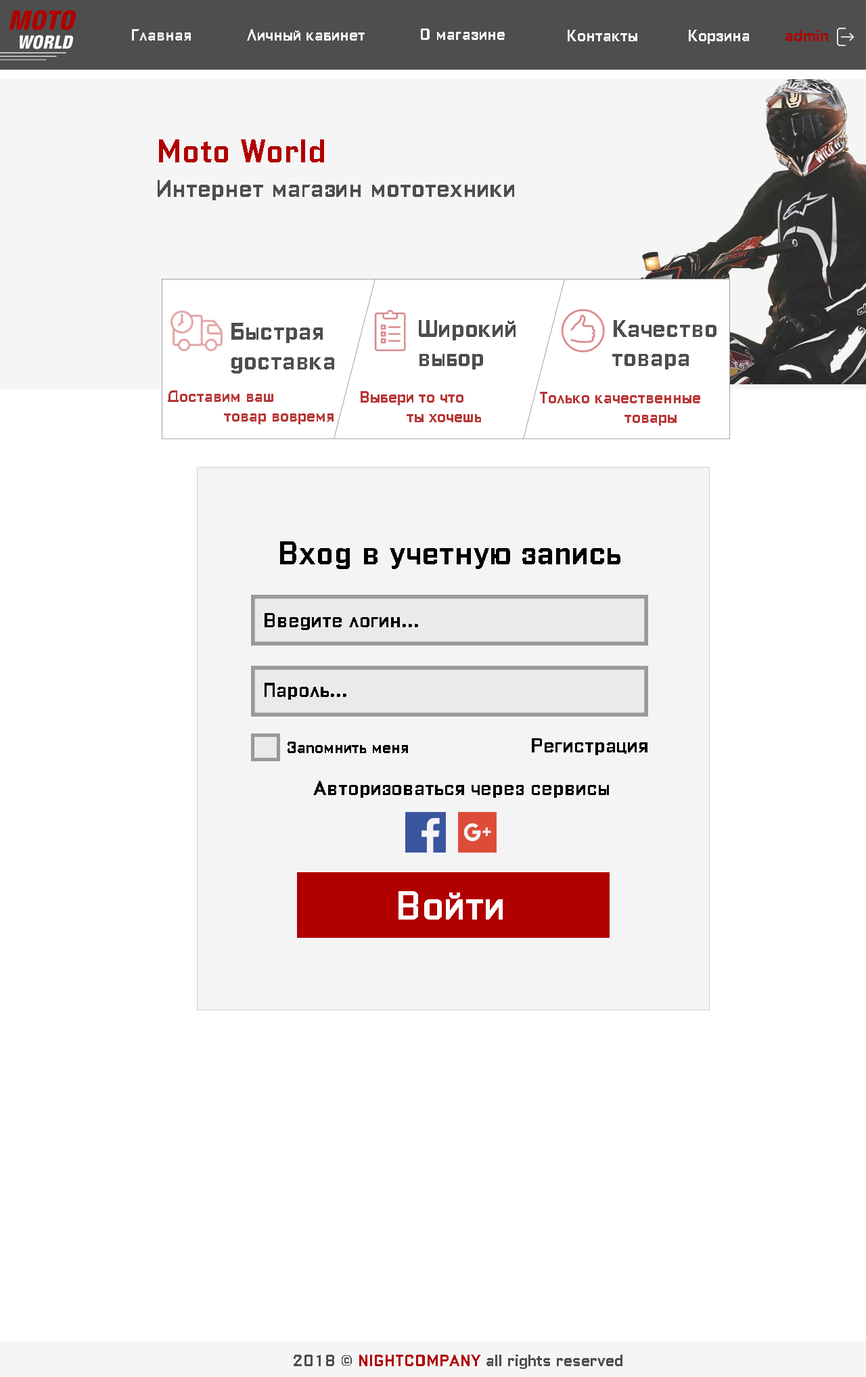
<style>
.page{position:relative;width:866px;height:1377px;background:#ffffff}
.page>*{position:absolute;margin:0}
.t1{font:16.2px "ColumbiaPrintCyrillic";color:#f4f4f4}
.t2{font:16.2px "ColumbiaPrintCyrillic";color:#b00000}
.t3{font:32.5px "ColumbiaPrintCyrillic";color:#b00000}
.t4{font:24.4px "ColumbiaPrintCyrillic";color:#4e4e4e}
.t5{font:24.3px "ColumbiaPrintCyrillic";color:#4e4e4e}
.t6{font:16.2px "ColumbiaPrintCyrillic";color:#b83737}
.t7{font:32.5px "ColumbiaPrintCyrillic";color:#000000}
.t8{font:20.3px "ColumbiaPrintCyrillic";color:#000000}
.t9{font:16.2px "ColumbiaPrintCyrillic";color:#000000}
.t10{font:40.6px "ColumbiaPrintCyrillic";color:#ffffff}
.t11{font:16.2px "ColumbiaPrintCyrillic";color:#4e4e4e}
</style>
<div class="page">
<p class="t1" style="left:132px;top:29px;width:59px;height:12px">Главная</p>
<p class="t1" style="left:247px;top:29px;width:118px;height:12px">Личный кабинет</p>
<p class="t1" style="left:421px;top:28px;width:84px;height:12px">О магазине</p>
<p class="t1" style="left:568px;top:30px;width:69px;height:11px">Контакты</p>
<p class="t1" style="left:689px;top:30px;width:60px;height:14px">Корзина</p>
<p class="t2" style="left:786px;top:30px;width:42px;height:11px">admin</p>
<p class="t3" style="left:159px;top:139px;width:165px;height:23px">Moto World</p>
<p class="t4" style="left:158px;top:180px;width:356px;height:20px">Интернет магазин мототехники</p>
<p class="t5" style="left:231px;top:323px;width:103px;height:50px">Быстрая<br>доставка</p>
<p class="t5" style="left:419px;top:320px;width:97px;height:49px">Широкий <br>выбор</p>
<p class="t5" style="left:612px;top:320px;width:105px;height:49px">Качество товара</p>
<p class="t6" style="left:168px;top:390px;width:166px;height:34px">Доставим ваш <br>            товар вовремя</p>
<p class="t6" style="left:361px;top:391px;width:120px;height:31px">Выбери то что <br>          ты хочешь</p>
<p class="t6" style="left:540px;top:392px;width:160px;height:34px">Только качественные <br>                  товары</p>
<p class="t7" style="left:280px;top:541px;width:340px;height:28px">Вход в учетную запись</p>
<p class="t8" style="left:265px;top:613px;width:153px;height:17px">Введите логин...</p>
<p class="t8" style="left:265px;top:683px;width:81px;height:17px">Пароль...</p>
<p class="t9" style="left:288px;top:742px;width:120px;height:11px">Запомнить меня</p>
<p class="t8" style="left:532px;top:738px;width:116px;height:17px">Регистрация</p>
<p class="t8" style="left:313px;top:781px;width:296px;height:17px">Авторизоваться через сервисы</p>
<p class="t10" style="left:399px;top:891px;width:104px;height:28px">Войти</p>
<p class="t11" style="left:294px;top:1355px;width:328px;height:14px">2018 © <span class="t2">NIGHTCOMPANY </span>all rights reserved</p>
</div>
